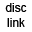
<style>
.page{position:relative;width:32px;height:32px;background:#ffffff}
.page>*{position:absolute;margin:0}
.t1{font:11.8px "ArialMT";color:#000000}
</style>
<div class="page">
<p class="t1" style="left:5px;top:3px;width:22px;height:24px;text-align:center">disc<br>link</p>
</div>
